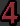
<style>
.page{position:relative;width:20px;height:26px;background:#333333}
.page>*{position:absolute;margin:0}
.t1{font:30.7px "MicrosoftNewTaiLue-Bold"}
</style>
<div class="page">
<p class="t1" style="left:2px;top:2px;width:16px;height:22px">4</p>
</div>
